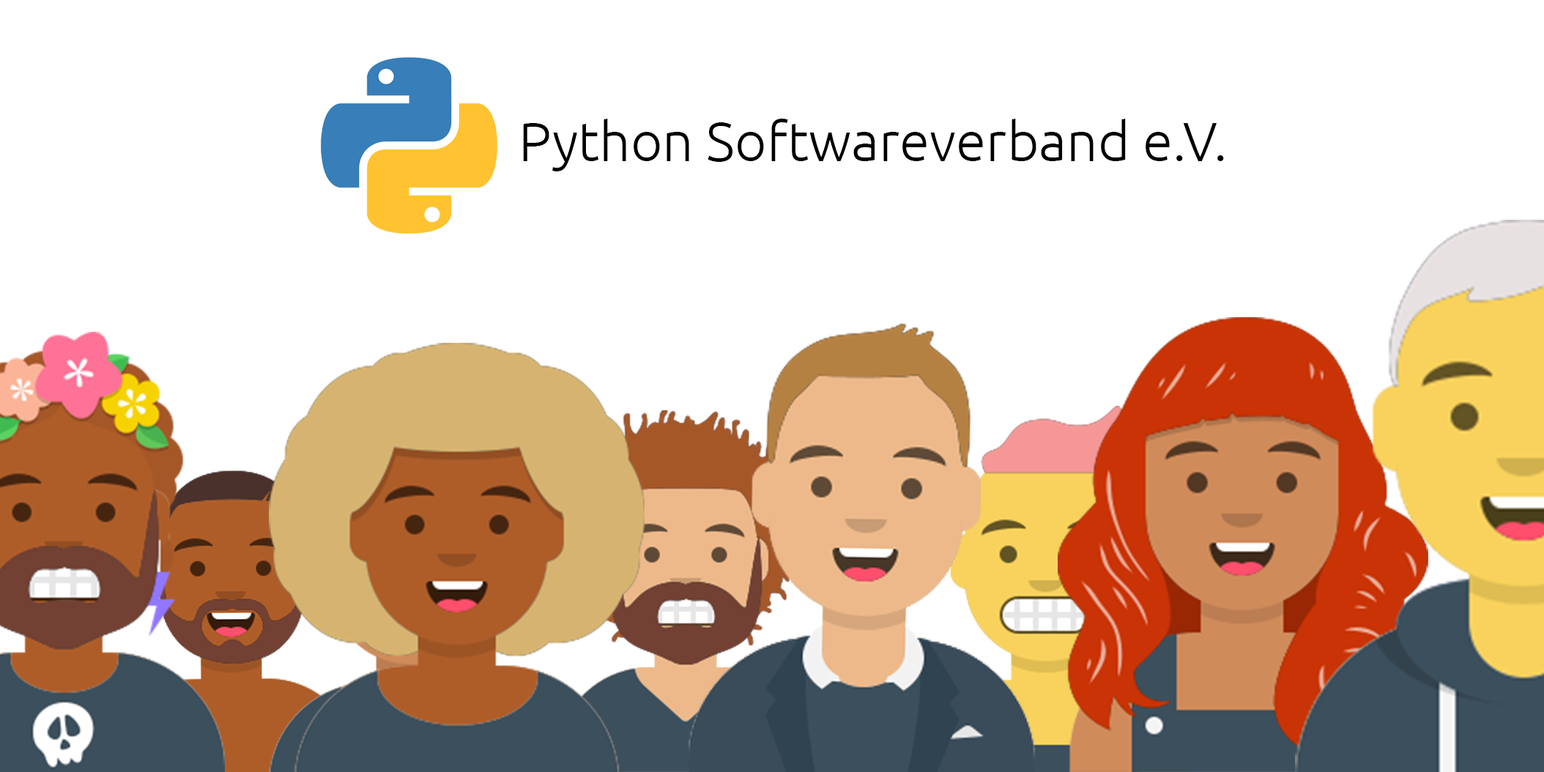
<style>
.page{position:relative;width:1544px;height:772px;background:#ffffff}
.page>*{position:absolute;margin:0}
.t1{font:54.9px "Ubuntu-Light";color:#000000}
</style>
<div class="page">
<p class="t1" style="left:523px;top:119px;width:701px;height:52px">Python Softwareverband e.V.</p>
</div>
